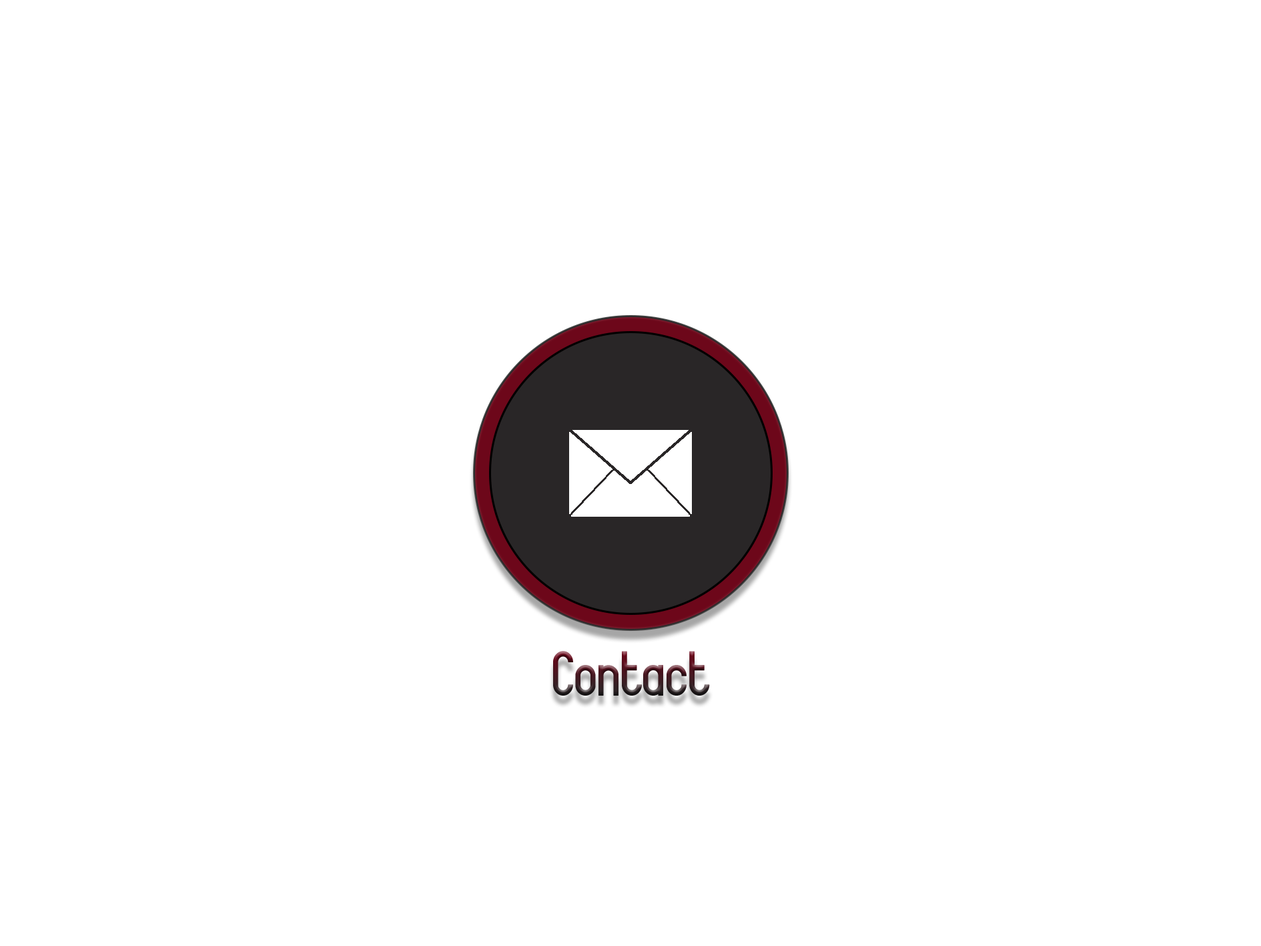
<style>
.page{position:relative;width:1261px;height:946px;background:#ffffff}
.page>*{position:absolute;margin:0}
.t1{font:55.6px "Targa";scale:0.9 1}
</style>
<div class="page">
<p class="t1" style="left:553px;top:651px;width:157px;height:44px">Contact</p>
</div>
